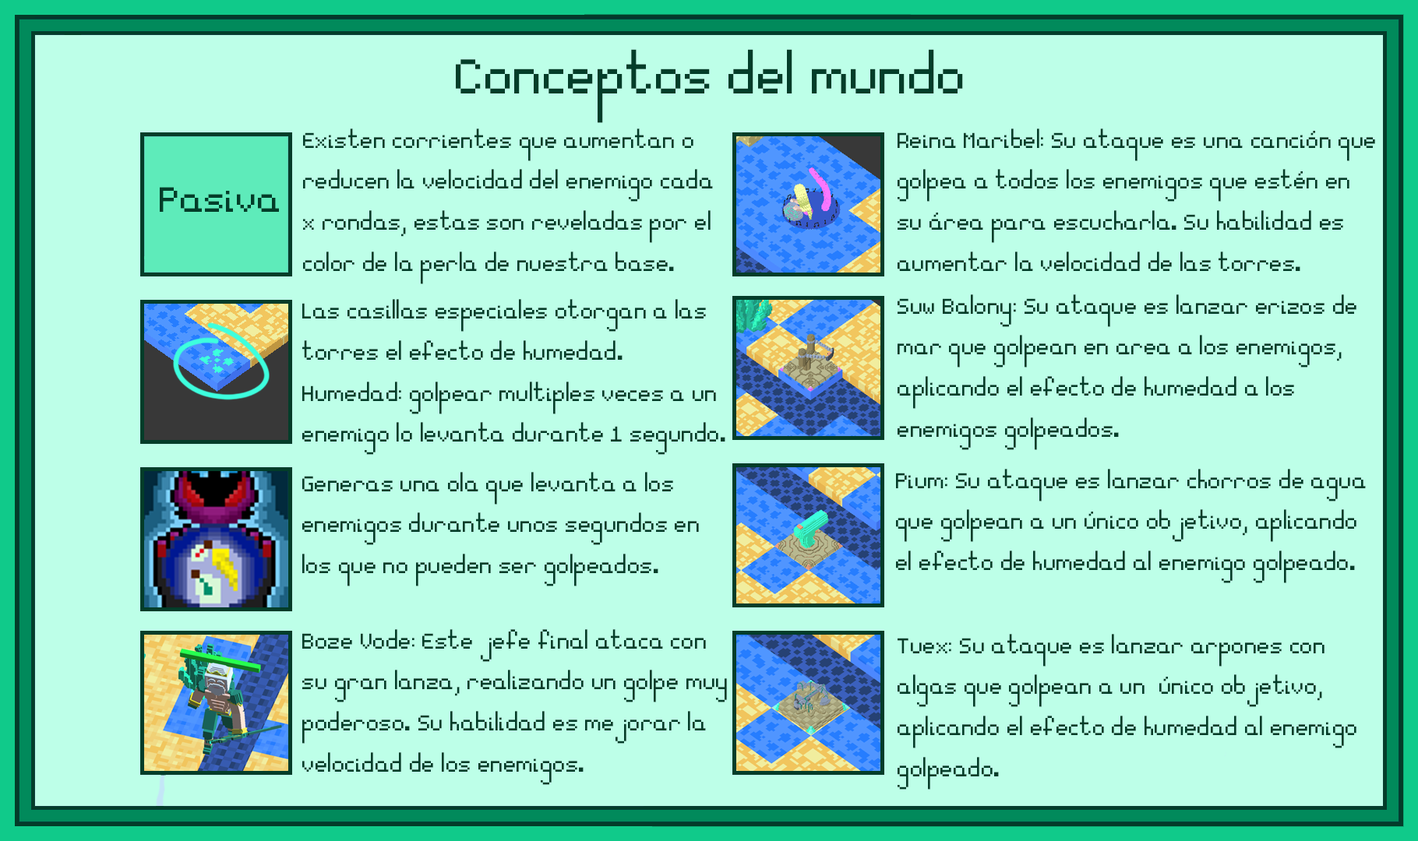
<style>
.page{position:relative;width:1418px;height:841px;background:#bdffe8}
.page>*{position:absolute;margin:0}
.t1{font:77.9px "Essential";color:#033d29}
.t2{font:34.3px "Essential";color:#033d29}
.t3{font:56.1px "Essential";color:#033d29}
</style>
<div class="page">
<p class="t1" style="left:456px;top:49px;width:507px;height:74px">Conceptos del mundo</p>
<p class="t2" style="left:303px;top:129px;width:410px;height:155px">Existen corrientes que aumentan o <br>reducen la velocidad del enemigo cada<br>x rondas, estas son reveladas por el <br>color de la perla de nuestra base.</p>
<p class="t2" style="left:897px;top:129px;width:478px;height:142px">Reina Maribel: Su ataque es una canción que<br>golpea a todos los enemigos que estén en<br>su área para escucharla. Su habilidad es<br>aumentar la velocidad de las torres.</p>
<p class="t3" style="left:160px;top:187px;width:119px;height:25px">Pasiva</p>
<p class="t2" style="left:302px;top:299px;width:423px;height:156px">Las casillas especiales otorgan a las<br>torres el efecto de humedad.<br>Humedad: golpear multiples veces a un<br>enemigo lo levanta durante 1 segundo.</p>
<p class="t2" style="left:897px;top:294px;width:459px;height:156px">Suw Balony: Su ataque es lanzar erizos de <br>mar que golpean en area a los enemigos, <br>aplicando el efecto de humedad a los<br>enemigos golpeados.</p>
<p class="t2" style="left:302px;top:472px;width:397px;height:114px">Generas una ola que levanta a los<br>enemigos durante unos segundos en <br>los que no pueden ser golpeados.</p>
<p class="t2" style="left:896px;top:469px;width:469px;height:114px">Pium: Su ataque es lanzar chorros de agua<br>que golpean a un único objetivo, aplicando <br>el efecto de humedad al enemigo golpeado.</p>
<p class="t2" style="left:302px;top:629px;width:425px;height:156px">Boze Vode: Este jefe final ataca con <br>su gran lanza, realizando un golpe muy<br>poderoso. Su habilidad es mejorar la<br>velocidad de los enemigos.</p>
<p class="t2" style="left:897px;top:634px;width:459px;height:156px">Tuex: Su ataque es lanzar arpones con <br>algas que golpean a un  único objetivo, <br>aplicando el efecto de humedad al enemigo<br>golpeado.</p>
</div>
